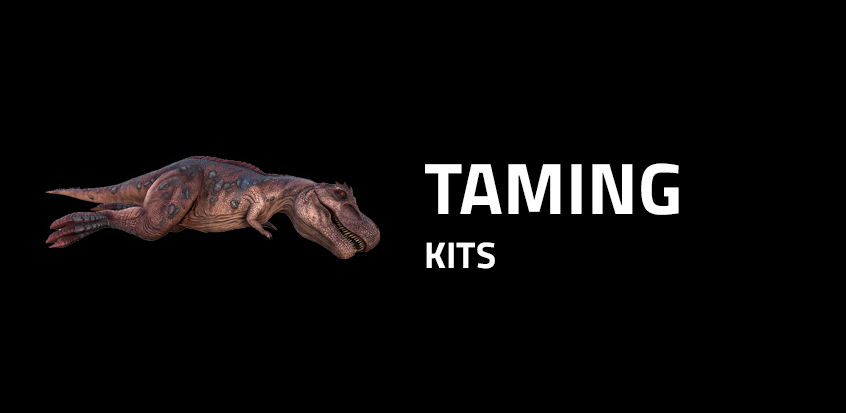
<style>
.page{position:relative;width:846px;height:413px;background:#000000}
.page>*{position:absolute;margin:0}
.t1{font:73px "TitilliumWeb-Bold";letter-spacing:0.001em;color:#ffffff}
.t2{font:37px "TitilliumWeb-Bold";letter-spacing:0.001em;color:#ffffff}
</style>
<div class="page">
<p class="t1" style="left:425px;top:163px;width:254px;height:52px">TAMING</p>
<p class="t2" style="left:426px;top:242px;width:69px;height:27px">KITS</p>
</div>
